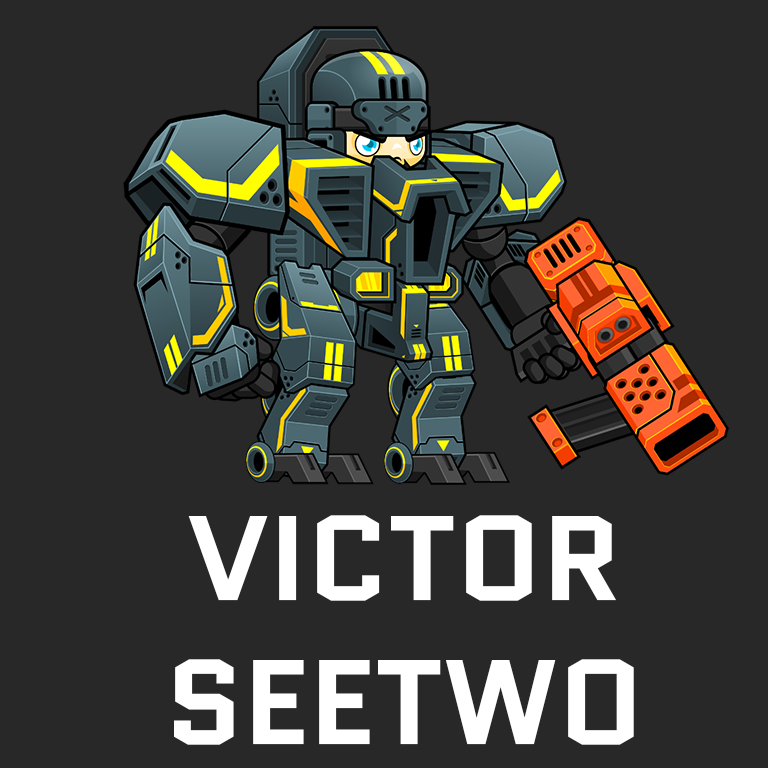
<style>
.page{position:relative;width:768px;height:768px;background:#282828}
.page>*{position:absolute;margin:0}
.t1{font:120px "Quantico-Bold";color:#ffffff}
</style>
<div class="page">
<p class="t1" style="left:174px;top:515px;width:460px;height:230px;text-align:center">VICTOR <br>SEETWO</p>
</div>
